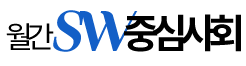
<style>
.page{position:relative;width:246px;height:66px;background:#ffffff}
.page>*{position:absolute;margin:0}
.t1{font:40px "NotoSansCJKkr-Bold";letter-spacing:-0.2em;color:#000000}
.t2{font:30px "NotoSansCJKkr-Regular";letter-spacing:-0.2em;color:#000000}
.t3{font:48px "HSBomBaram2.0";letter-spacing:-0.2em;color:#135fc7;font-style:italic}
</style>
<div class="page">
<p class="t1" style="left:6px;top:10px;width:235px;height:42px"><span class="t2">월간 </span><span class="t3">SW</span>중심사회</p>
</div>
